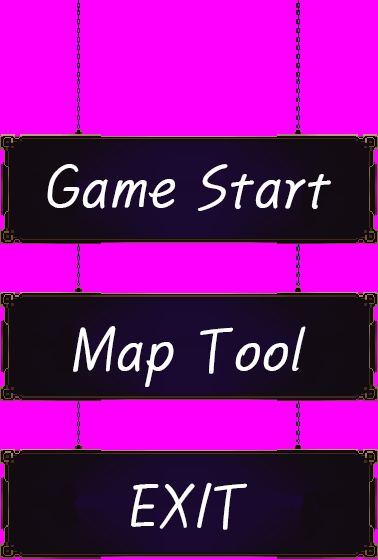
<style>
.page{position:relative;width:378px;height:560px;background:#ff00ff}
.page>*{position:absolute;margin:0}
.t1{font:60px "PyunjiR-HM";color:#ffffff}
</style>
<div class="page">
<p class="t1" style="left:47px;top:164px;width:284px;height:47px">Game Start</p>
<p class="t1" style="left:73px;top:326px;width:233px;height:61px">Map Tool</p>
<p class="t1" style="left:131px;top:482px;width:116px;height:48px">EXIT</p>
</div>
